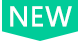
<style>
.page{position:relative;width:80px;height:48px;background:#00cc99}
.page>*{position:absolute;margin:0}
.t1{font:26px "MicrosoftYaHei";color:#ffffff;font-weight:bold}
</style>
<div class="page">
<p class="t1" style="left:10px;top:6px;width:62px;height:21px">NEW</p>
</div>
